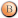
<style>
.page{position:relative;width:18px;height:18px}
.page>*{position:absolute;margin:0}
.t1{font:10px "TimesNewRomanPSMT"}
</style>
<div class="page">
<p class="t1" style="left:6px;top:5px;width:7px;height:8px">B</p>
</div>
